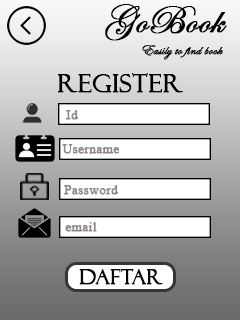
<style>
.page{position:relative;width:240px;height:320px}
.page>*{position:absolute;margin:0}
.t1{font:40px "EdwardianScriptITC";color:#000000;font-weight:bold}
.t2{font:14.3px "EdwardianScriptITC";color:#000000;font-weight:bold}
.t3{font:25.3px "FelixTitlingMT";color:#000000;font-weight:bold}
.t4{font:13.3px "TimesNewRomanPSMT";color:#8e8888;font-weight:bold}
.t5{font:20.3px "FelixTitlingMT";color:#050505;font-weight:bold}
</style>
<div class="page">
<p class="t1" style="left:105px;top:4px;width:122px;height:37px">GoBook</p>
<p class="t2" style="left:142px;top:45px;width:81px;height:15px">Easily to find book</p>
<p class="t3" style="left:58px;top:73px;width:125px;height:20px">register</p>
<p class="t4" style="left:66px;top:110px;width:12px;height:10px">Id</p>
<p class="t4" style="left:62px;top:144px;width:58px;height:10px">Username</p>
<p class="t4" style="left:64px;top:185px;width:54px;height:10px">Password</p>
<p class="t4" style="left:65px;top:222px;width:32px;height:10px">email</p>
<p class="t5" style="left:79px;top:269px;width:84px;height:16px">DAFTAR</p>
</div>
